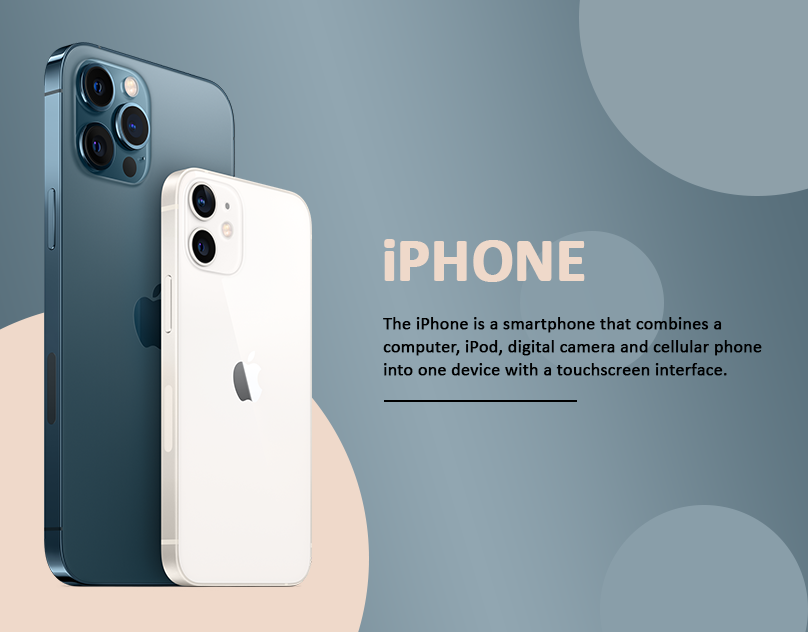
<style>
.page{position:relative;width:808px;height:632px}
.page>*{position:absolute;margin:0}
.t1{font:62px "Calibri-Bold";letter-spacing:-0.05em;color:#efd9ca;text-transform:uppercase;font-weight:bold}
.t2{font:62px "Calibri-Bold";letter-spacing:-0.05em;color:#efd9ca;font-weight:bold}
.t3{font:17.7px/23.4px "Calibri";color:#000000;font-weight:bold}
</style>
<div class="page">
<p class="t1" style="left:384px;top:239px;width:201px;height:43px"><span class="t2">i</span>phone</p>
<p class="t3" style="left:383px;top:317px;width:379px;height:59px">The iPhone is a smartphone that combines a<br>computer, iPod, digital camera and cellular phone<br>into one device with a touchscreen interface.</p>
</div>
